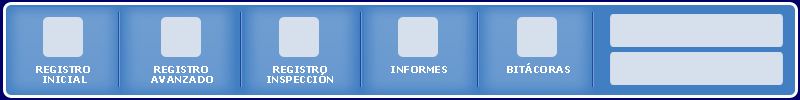
<style>
.page{position:relative;width:800px;height:100px;background:#d5e0ec}
.page>*{position:absolute;margin:0}
.t1{font:10px "Verdana-Bold";letter-spacing:-0.05em;color:#ffffff;text-transform:uppercase}
.t2{font:10px/10px "Verdana-Bold";letter-spacing:-0.05em;color:#ffffff;text-transform:uppercase}
</style>
<div class="page">
<p class="t1" style="left:507px;top:63px;width:63px;height:10px">Bitácoras</p>
<p class="t2" style="left:36px;top:66px;width:54px;height:17px;text-align:center">Registro <br>Inicial</p>
<p class="t2" style="left:151px;top:66px;width:62px;height:17px;text-align:center">Registro <br>Avanzado</p>
<p class="t2" style="left:267px;top:66px;width:66px;height:17px;text-align:center">registro<br>inspección</p>
<p class="t1" style="left:391px;top:66px;width:56px;height:7px">Informes</p>
</div>
